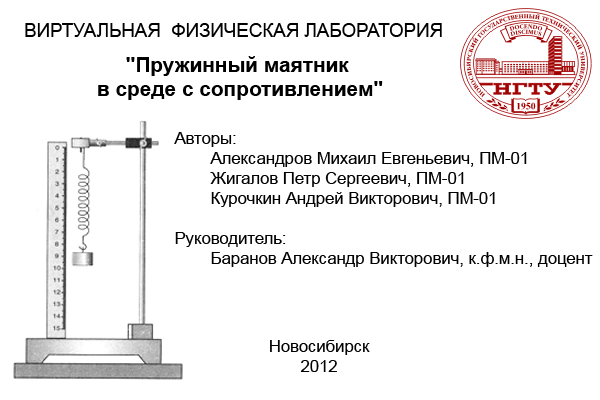
<style>
.page{position:relative;width:600px;height:400px;background:#ffffff}
.page>*{position:absolute;margin:0}
.t1{font:18.8px "ArialMT";color:#000000}
.t2{font:20.8px "Arial-BoldMT";color:#000000}
.t3{font:16.7px "ArialMT";color:#000000}
</style>
<div class="page">
<p class="t1" style="left:25px;top:23px;width:417px;height:14px">ВИРТУАЛЬНАЯ  ФИЗИЧЕСКАЯ ЛАБОРАТОРИЯ</p>
<p class="t2" style="left:98px;top:56px;width:285px;height:44px;text-align:center">"Пружинный маятник <br>в среде с сопротивлением"</p>
<p class="t3" style="left:174px;top:132px;width:419px;height:135px">Авторы:<br> Александров Михаил Евгеньевич, ПМ-01<br> Жигалов Петр Сергеевич, ПМ-01<br> Курочкин Андрей Викторович, ПМ-01<br><br>Руководитель:  <br> Баранов Александр Викторович, к.ф.м.н., доцент</p>
<p class="t3" style="left:270px;top:340px;width:100px;height:32px;text-align:center">Новосибирск<br>2012</p>
</div>
